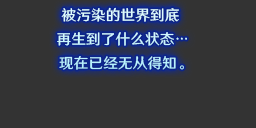
<style>
.page{position:relative;width:256px;height:128px;background:#333333}
.page>*{position:absolute;margin:0}
.t1{font:14.7px/24px "HYWenHei-FEW";letter-spacing:0.005em;color:#cdf7ff}
</style>
<div class="page">
<p class="t1" style="left:57px;top:7px;width:130px;height:63px;text-align:center">被污染的世界到底<br> 再生到了什么状态…<br>  现在已经无从得知。</p>
</div>
